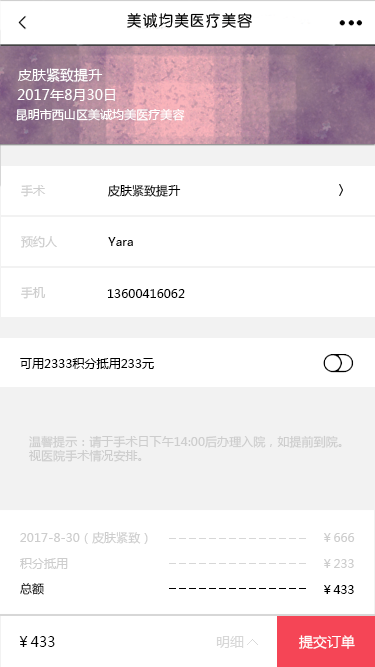
<style>
.page{position:relative;width:375px;height:667px;background:#ffffff}
.page>*{position:absolute;margin:0}
.t1{font:14px "MicrosoftYaHei";letter-spacing:0.005em;color:#ffffff}
.t2{font:12px "MicrosoftYaHei";letter-spacing:0.005em;color:#ffffff}
.t3{font:12px "MicrosoftYaHei";letter-spacing:0.005em;color:#cdcdcd}
.t4{font:12px "MicrosoftYaHei";letter-spacing:0.005em;color:#000000}
.t5{font:12px/14px "MicrosoftYaHei";letter-spacing:0.005em;color:#cdcdcd}
.t6{font:14px "MicrosoftYaHei";letter-spacing:0.005em;color:#000000}
.t7{font:14px "MicrosoftYaHei";letter-spacing:0.005em;color:#d7d7d7}
</style>
<div class="page">
<p class="t1" style="left:18px;top:68px;width:85px;height:15px">皮肤紧致提升</p>
<p class="t1" style="left:17px;top:89px;width:98px;height:12px">2017年8月30日</p>
<p class="t2" style="left:16px;top:109px;width:169px;height:12px">昆明市西山区美诚均美医疗美容</p>
<p class="t3" style="left:21px;top:185px;width:25px;height:12px">手术</p>
<p class="t4" style="left:108px;top:184px;width:73px;height:13px">皮肤紧致提升</p>
<p class="t3" style="left:21px;top:235px;width:36px;height:13px">预约人</p>
<p class="t4" style="left:108px;top:237px;width:25px;height:9px">Yara</p>
<p class="t3" style="left:21px;top:287px;width:25px;height:12px">手机</p>
<p class="t4" style="left:107px;top:289px;width:78px;height:9px">13600416062</p>
<p class="t4" style="left:20px;top:358px;width:134px;height:11px">可用2333积分抵用233元</p>
<p class="t5" style="left:29px;top:435px;width:313px;height:27px">温馨提示：请于手术日下午14:00后办理入院，如提前到院。<br>视医院手术情况安排。</p>
<p class="t3" style="left:20px;top:531px;width:128px;height:13px">2017-8-30（皮肤紧致）</p>
<p class="t3" style="left:324px;top:533px;width:31px;height:9px">￥666</p>
<p class="t3" style="left:20px;top:558px;width:48px;height:11px">积分抵用</p>
<p class="t3" style="left:324px;top:559px;width:30px;height:9px">￥233</p>
<p class="t4" style="left:20px;top:583px;width:24px;height:12px">总额</p>
<p class="t4" style="left:324px;top:585px;width:30px;height:9px">￥433</p>
<p class="t6" style="left:19px;top:636px;width:36px;height:11px">￥433</p>
<p class="t7" style="left:216px;top:636px;width:28px;height:12px">明细</p>
<p class="t1" style="left:299px;top:635px;width:56px;height:14px">提交订单</p>
</div>
